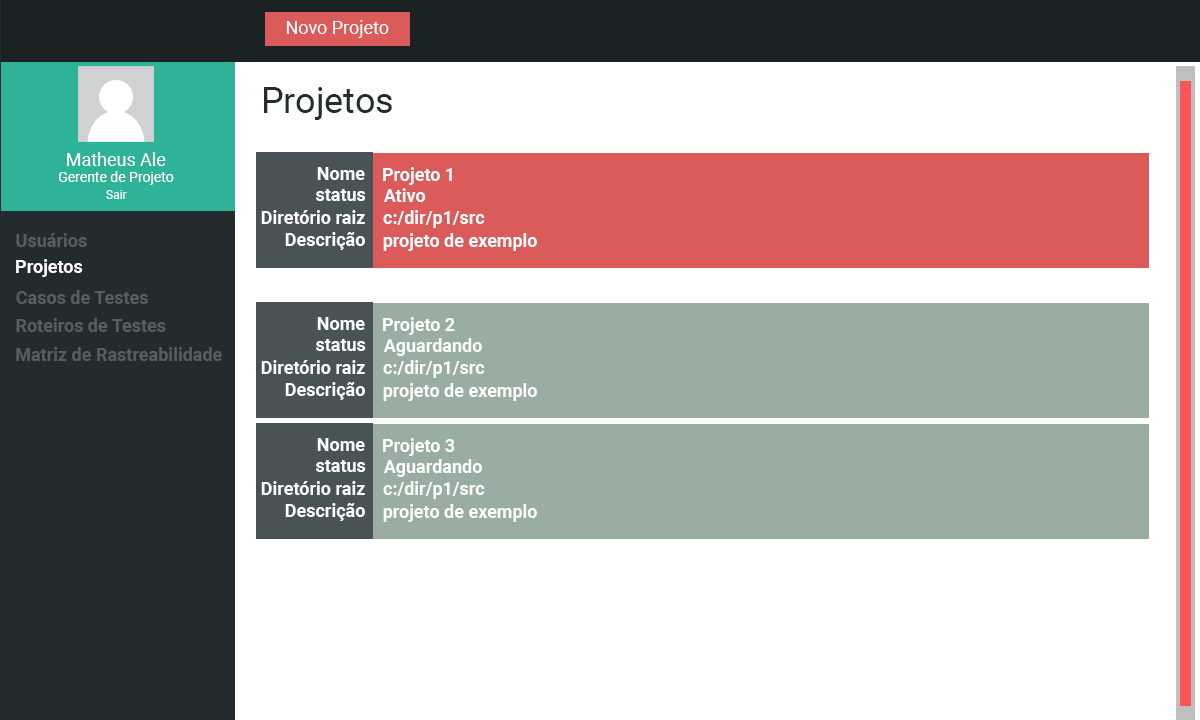
<style>
.page{position:relative;width:1200px;height:720px;background:#ffffff}
.page>*{position:absolute;margin:0}
.t1{font:18px "Roboto-Regular";color:#ffffff}
.t2{font:36px "Roboto-Regular";color:#242c2e}
.t3{font:18.1px "Roboto-Regular";color:#ffffff}
.t4{font:14.1px "Roboto-Regular";color:#ffffff}
.t5{font:17.9px "Roboto-Bold";color:#fefefe}
.t6{font:18px "Roboto-Bold";color:#fefefe}
.t7{font:12.1px "Roboto-Regular";color:#ffffff}
.t8{font:18px "Roboto-Bold";color:#545f61}
</style>
<div class="page">
<p class="t1" style="left:286px;top:20px;width:103px;height:18px">Novo Projeto</p>
<p class="t2" style="left:264px;top:87px;width:128px;height:33px">Projetos</p>
<p class="t3" style="left:67px;top:152px;width:99px;height:14px">Matheus Ale</p>
<p class="t4" style="left:59px;top:171px;width:115px;height:14px">Gerente de Projeto</p>
<p class="t5" style="left:317px;top:167px;width:48px;height:13px">Nome</p>
<p class="t6" style="left:383px;top:167px;width:69px;height:18px">Projeto 1</p>
<p class="t7" style="left:106px;top:190px;width:21px;height:9px">Sair</p>
<p class="t5" style="left:316px;top:189px;width:50px;height:12px">status</p>
<p class="t6" style="left:383px;top:188px;width:43px;height:14px">Ativo</p>
<p class="t5" style="left:261px;top:210px;width:104px;height:14px">Diretório raiz</p>
<p class="t6" style="left:383px;top:210px;width:102px;height:18px">c:/dir/p1/src</p>
<p class="t8" style="left:16px;top:233px;width:71px;height:14px">Usuários</p>
<p class="t5" style="left:285px;top:232px;width:80px;height:18px">Descrição</p>
<p class="t6" style="left:383px;top:233px;width:154px;height:18px">projeto de exemplo</p>
<p class="t6" style="left:16px;top:259px;width:67px;height:18px">Projetos</p>
<p class="t8" style="left:16px;top:290px;width:132px;height:14px">Casos de Testes</p>
<p class="t8" style="left:16px;top:318px;width:150px;height:14px">Roteiros de Testes</p>
<p class="t5" style="left:317px;top:317px;width:48px;height:13px">Nome</p>
<p class="t6" style="left:383px;top:317px;width:72px;height:18px">Projeto 2</p>
<p class="t5" style="left:316px;top:339px;width:50px;height:12px">status</p>
<p class="t6" style="left:383px;top:338px;width:99px;height:18px">Aguardando</p>
<p class="t8" style="left:16px;top:347px;width:206px;height:14px">Matriz de Rastreabilidade</p>
<p class="t5" style="left:261px;top:360px;width:104px;height:14px">Diretório raiz</p>
<p class="t6" style="left:383px;top:360px;width:102px;height:18px">c:/dir/p1/src</p>
<p class="t5" style="left:285px;top:382px;width:80px;height:18px">Descrição</p>
<p class="t6" style="left:383px;top:383px;width:154px;height:18px">projeto de exemplo</p>
<p class="t5" style="left:317px;top:438px;width:48px;height:13px">Nome</p>
<p class="t6" style="left:383px;top:438px;width:72px;height:18px">Projeto 3</p>
<p class="t5" style="left:316px;top:460px;width:50px;height:12px">status</p>
<p class="t6" style="left:383px;top:459px;width:99px;height:18px">Aguardando</p>
<p class="t5" style="left:261px;top:481px;width:104px;height:14px">Diretório raiz</p>
<p class="t6" style="left:383px;top:481px;width:102px;height:18px">c:/dir/p1/src</p>
<p class="t5" style="left:285px;top:503px;width:80px;height:18px">Descrição</p>
<p class="t6" style="left:383px;top:504px;width:154px;height:18px">projeto de exemplo</p>
</div>
